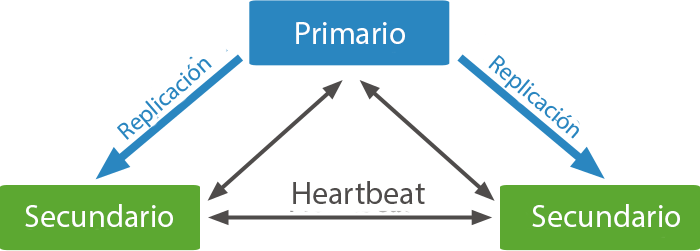
<style>
.page{position:relative;width:700px;height:251px;background:#ffffff}
.page>*{position:absolute;margin:0}
.t1{font:32px "MyriadPro-Regular";color:#ffffff}
.t2{font:24px "MyriadPro-Regular";color:#2a86c0}
.t3{font:32px "MyriadPro-Regular";color:#4f4c4b}
</style>
<div class="page">
<p class="t1" style="left:296px;top:22px;width:109px;height:22px">Primario</p>
<p class="t2" style="left:117px;top:59px;width:95px;height:81px;rotate:-41deg">Replicación</p>
<p class="t2" style="left:488px;top:55px;width:91px;height:84px;rotate:40deg">Replicación</p>
<p class="t3" style="left:293px;top:181px;width:132px;height:23px">Heartbeat</p>
<p class="t1" style="left:25px;top:204px;width:148px;height:23px">Secundario</p>
<p class="t1" style="left:532px;top:204px;width:148px;height:23px">Secundario</p>
</div>
